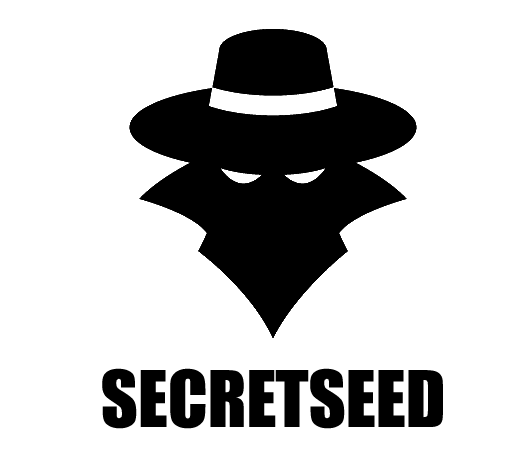
<style>
.page{position:relative;width:532px;height:468px;background:#ffffff}
.page>*{position:absolute;margin:0}
.t1{font:72px "Impact";color:#000000}
</style>
<div class="page">
<p class="t1" style="left:102px;top:368px;width:341px;height:61px">SECRETSEED</p>
</div>
